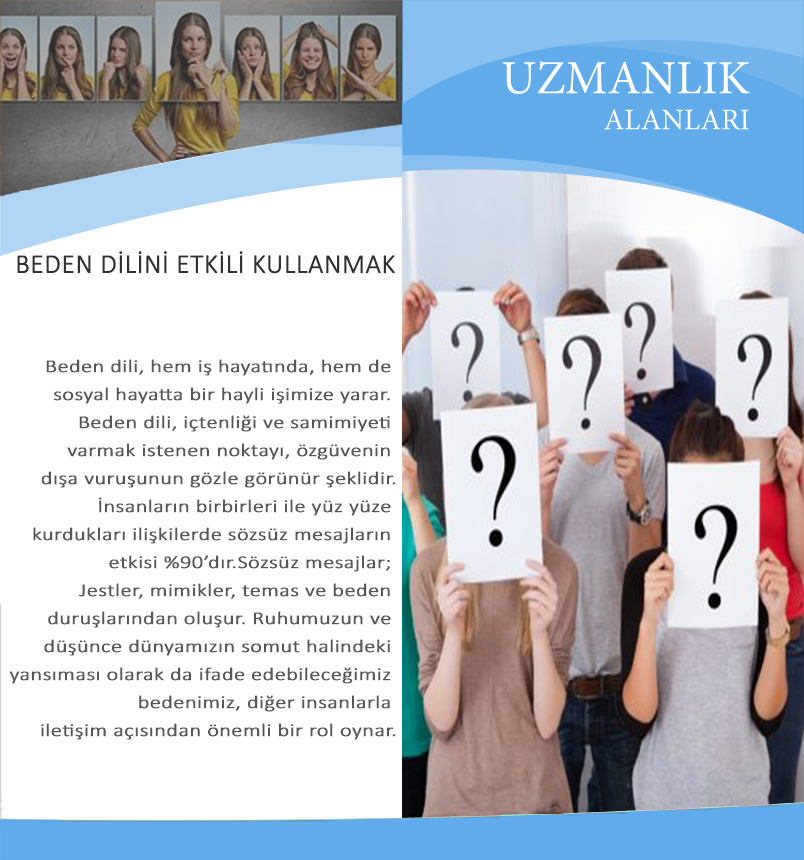
<style>
.page{position:relative;width:804px;height:860px;background:#ffffff}
.page>*{position:absolute;margin:0}
.t1{font:47.6px "MinionPro-Regular";color:#ffffff}
.t2{font:30px "MinionPro-Regular";color:#ffffff}
.t3{font:27px "Calibri-Light";color:#313131;font-weight:bold}
.t4{font:18.1px/28px "Calibri-Light";color:#575757;font-weight:bold;scale:1.22 1}
</style>
<div class="page">
<p class="t1" style="left:502px;top:61px;width:248px;height:69px;text-align:right">UZMANLIK<br><span class="t2"> ALANLARI</span></p>
<p class="t3" style="left:17px;top:251px;width:378px;height:23px">BEDEN DİLİNİ ETKİLİ KULLANMAK</p>
<p class="t4" style="left:9px;top:359px;width:387px;height:381px;text-align:right">Beden dili, hem iş hayatında, hem de <br>sosyal hayatta bir hayli işimize yarar. <br>Beden dili, içtenliği ve samimiyeti <br>varmak istenen noktayı, özgüvenin <br>dışa vuruşunun gözle görünür şeklidir.<br> İnsanların birbirleri ile yüz yüze <br>kurdukları ilişkilerde sözsüz mesajların <br>etkisi %90’dır.Sözsüz mesajlar; <br>Jestler, mimikler, temas ve beden <br>duruşlarından oluşur. Ruhumuzun ve <br>düşünce dünyamızın somut halindeki <br>yansıması olarak da ifade edebileceğimiz <br>bedenimiz, diğer insanlarla <br>iletişim açısından önemli bir rol oynar.</p>
</div>
